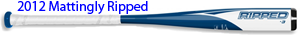
<style>
.page{position:relative;width:300px;height:35px;background:#ffffff}
.page>*{position:absolute;margin:0}
.t1{font:14px "MyriadPro-Regular";color:#0000ff}
</style>
<div class="page">
<p class="t1" style="left:17px;top:1px;width:131px;height:13px">2012 Mattingly Ripped</p>
</div>
